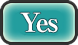
<style>
.page{position:relative;width:78px;height:45px}
.page>*{position:absolute;margin:0}
.t1{font:26px "RyuminPro-ExBold";letter-spacing:-0.08em;color:#ffffff}
</style>
<div class="page">
<p class="t1" style="left:20px;top:12px;width:38px;height:21px">Yes</p>
</div>
